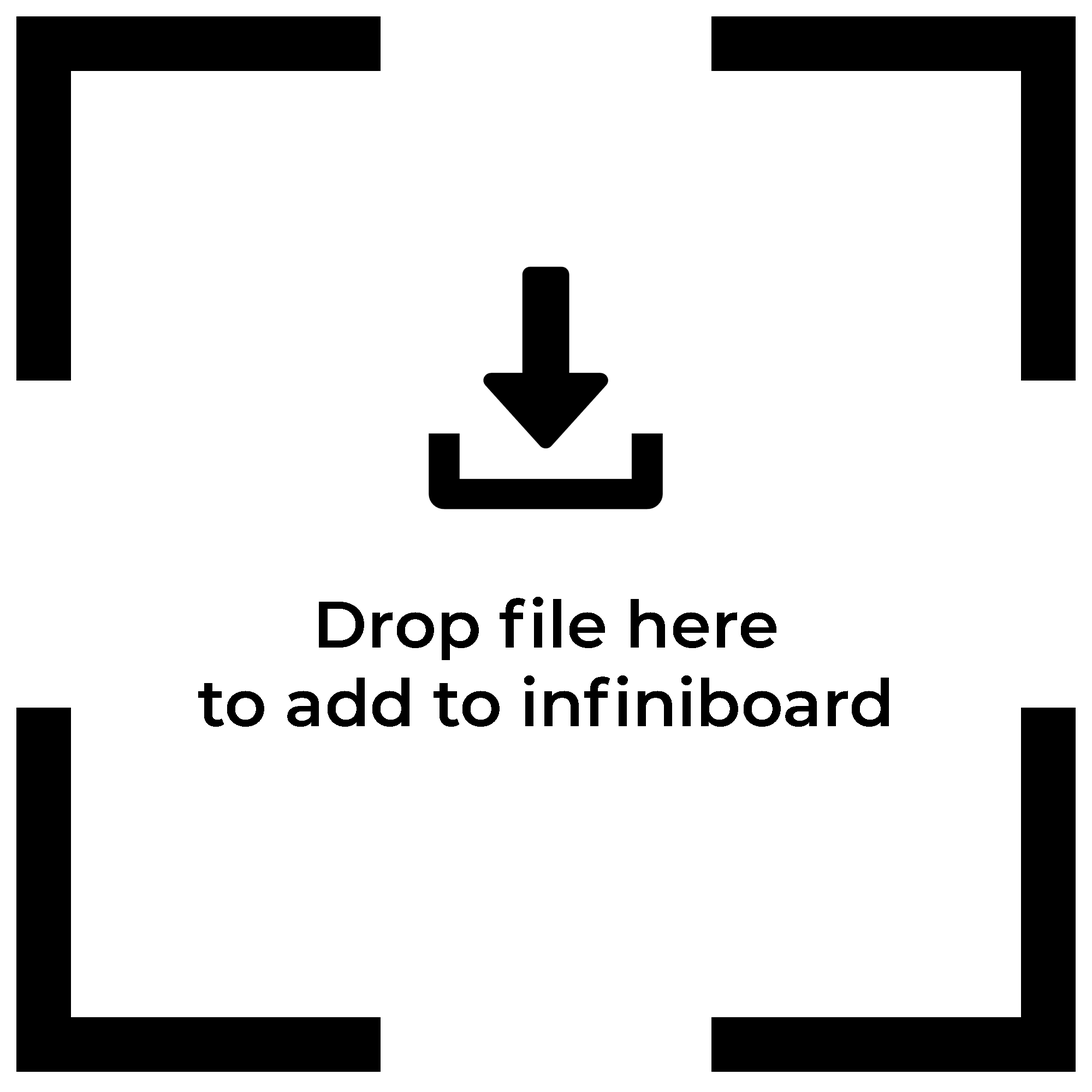
<style>
.page{position:relative;width:1092px;height:1092px;background:#ffffff}
.page>*{position:absolute;margin:0}
.t1{font:65.5px "Montserrat-SemiBold";color:#000000}
</style>
<div class="page">
<p class="t1" style="left:198px;top:597px;width:691px;height:130px;text-align:center">Drop file here<br>to add to infiniboard</p>
</div>
